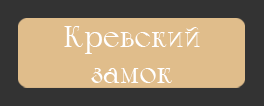
<style>
.page{position:relative;width:264px;height:106px;background:#e0bd8b}
.page>*{position:absolute;margin:0}
.t1{font:30px "Calypso-Regular";color:#ffffff}
</style>
<div class="page">
<p class="t1" style="left:64px;top:26px;width:136px;height:57px;text-align:center">Кревский<br>замок</p>
</div>
